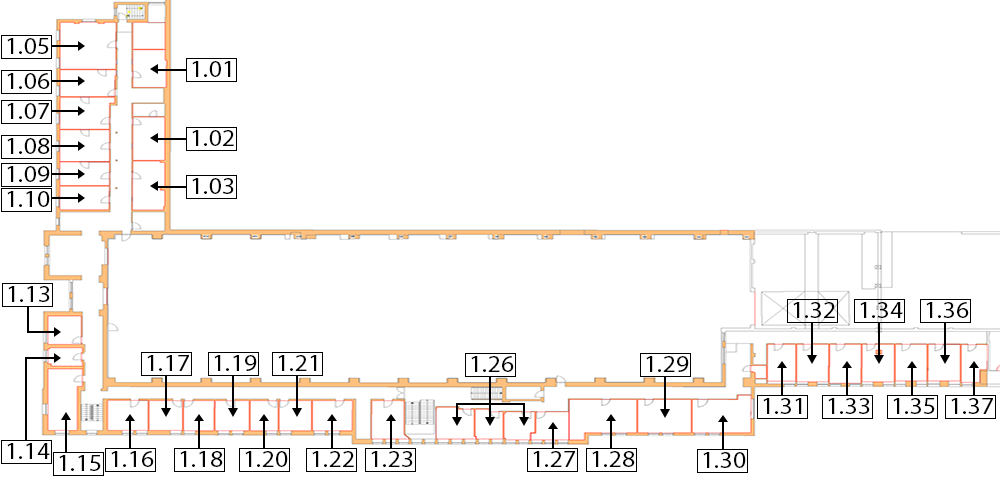
<style>
.page{position:relative;width:1000px;height:480px;background:#ffffff}
.page>*{position:absolute;margin:0}
.t1{font:23.3px "MyriadPro-Regular";color:#000000;scale:1.11 1}
</style>
<div class="page">
<p class="t1" style="left:7px;top:38px;width:42px;height:16px">1.05</p>
<p class="t1" style="left:192px;top:61px;width:39px;height:16px">1.01</p>
<p class="t1" style="left:7px;top:73px;width:43px;height:16px">1.06</p>
<p class="t1" style="left:7px;top:103px;width:42px;height:16px">1.07</p>
<p class="t1" style="left:192px;top:130px;width:42px;height:16px">1.02</p>
<p class="t1" style="left:7px;top:138px;width:43px;height:16px">1.08</p>
<p class="t1" style="left:7px;top:166px;width:43px;height:16px">1.09</p>
<p class="t1" style="left:192px;top:178px;width:42px;height:16px">1.03</p>
<p class="t1" style="left:7px;top:191px;width:43px;height:16px">1.10</p>
<p class="t1" style="left:8px;top:286px;width:42px;height:16px">1.13</p>
<p class="t1" style="left:793px;top:302px;width:42px;height:16px">1.32</p>
<p class="t1" style="left:860px;top:302px;width:43px;height:16px">1.34</p>
<p class="t1" style="left:926px;top:302px;width:43px;height:16px">1.36</p>
<p class="t1" style="left:147px;top:355px;width:42px;height:16px">1.17</p>
<p class="t1" style="left:214px;top:355px;width:43px;height:16px">1.19</p>
<p class="t1" style="left:278px;top:355px;width:39px;height:16px">1.21</p>
<p class="t1" style="left:471px;top:356px;width:43px;height:16px">1.26</p>
<p class="t1" style="left:646px;top:356px;width:43px;height:16px">1.29</p>
<p class="t1" style="left:763px;top:398px;width:39px;height:16px">1.31</p>
<p class="t1" style="left:828px;top:398px;width:42px;height:16px">1.33</p>
<p class="t1" style="left:893px;top:398px;width:42px;height:16px">1.35</p>
<p class="t1" style="left:951px;top:398px;width:42px;height:16px">1.37</p>
<p class="t1" style="left:7px;top:443px;width:43px;height:16px">1.14</p>
<p class="t1" style="left:59px;top:455px;width:42px;height:16px">1.15</p>
<p class="t1" style="left:111px;top:451px;width:43px;height:16px">1.16</p>
<p class="t1" style="left:180px;top:451px;width:43px;height:16px">1.18</p>
<p class="t1" style="left:245px;top:451px;width:43px;height:16px">1.20</p>
<p class="t1" style="left:312px;top:451px;width:42px;height:16px">1.22</p>
<p class="t1" style="left:371px;top:451px;width:42px;height:16px">1.23</p>
<p class="t1" style="left:533px;top:451px;width:42px;height:16px">1.27</p>
<p class="t1" style="left:592px;top:451px;width:43px;height:16px">1.28</p>
<p class="t1" style="left:703px;top:452px;width:43px;height:16px">1.30</p>
</div>
